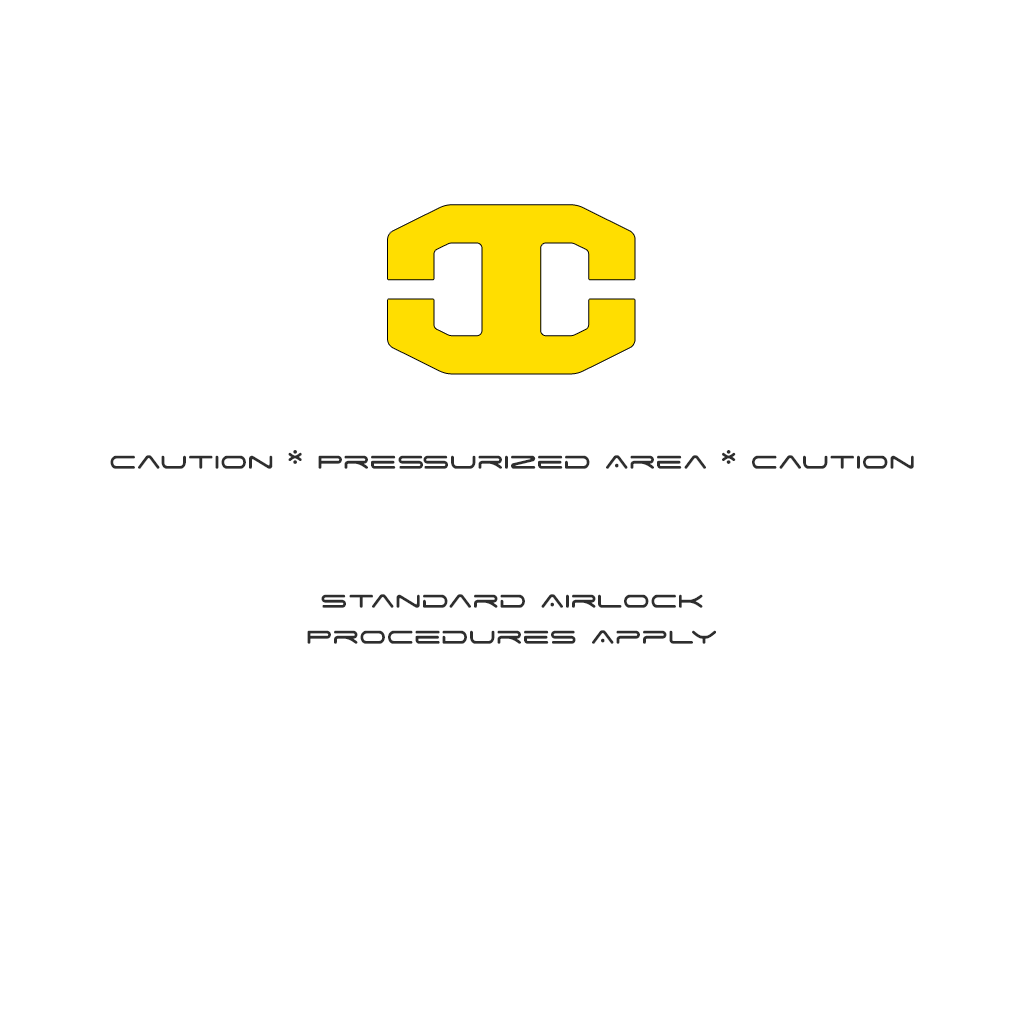
<style>
.page{position:relative;width:1024px;height:1024px;background:#ffffff}
.page>*{position:absolute;margin:0}
.t1{font:30px "SpaceAge";color:#2e2e2e}
</style>
<div class="page">
<p class="t1" style="left:110px;top:450px;width:804px;height:19px">Caution * Pressurized Area * Caution</p>
<p class="t1" style="left:307px;top:594px;width:409px;height:50px;text-align:center">Standard Airlock<br>Procedures Apply</p>
</div>
